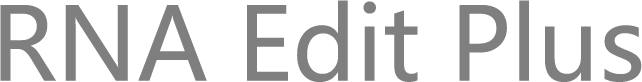
<style>
.page{position:relative;width:642px;height:82px;background:#ffffff}
.page>*{position:absolute;margin:0}
.t1{font:100px "MicrosoftYaHei";color:#7f7f7f}
</style>
<div class="page">
<p class="t1" style="left:0px;top:0px;width:642px;height:82px">RNA Edit Plus</p>
</div>
